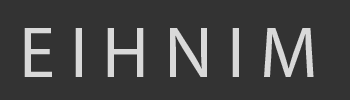
<style>
.page{position:relative;width:350px;height:100px;background:#333333}
.page>*{position:absolute;margin:0}
.t1{font:72px "MyriadPro-Regular";color:#d9d9d9}
</style>
<div class="page">
<p class="t1" style="left:24px;top:28px;width:290px;height:49px">E I H N I M</p>
</div>
